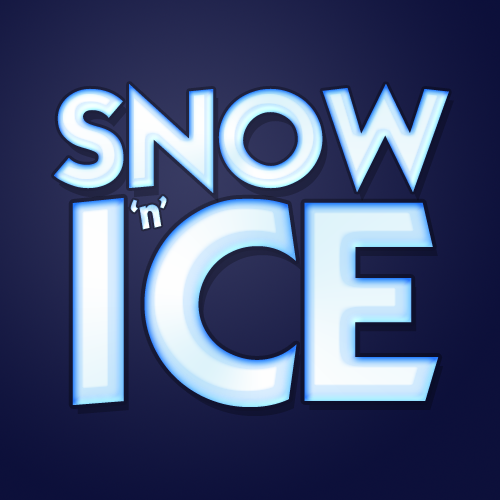
<style>
.page{position:relative;width:500px;height:500px}
.page>*{position:absolute;margin:0}
.t1{font:118.4px "KabelBdNormal";letter-spacing:-0.06em}
.t2{font:246px "KabelBdNormal";letter-spacing:-0.06em}
.t3{font:36px "KabelBdNormal";letter-spacing:-0.06em}
</style>
<div class="page">
<p class="t1" style="left:54px;top:84px;width:395px;height:109px">SNOW</p>
<p class="t2" style="left:72px;top:197px;width:367px;height:210px">ICE</p>
<p class="t3" style="left:130px;top:195px;width:37px;height:35px;rotate:-9deg">‘n’</p>
</div>
